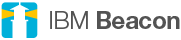
<style>
.page{position:relative;width:181px;height:40px;background:#ffffff}
.page>*{position:absolute;margin:0}
.t1{font:24px "HelvNeueBoldforIBM";color:#535353}
.t2{font:24px "HelvNeueLightforIBM";color:#535353}
</style>
<div class="page">
<p class="t1" style="left:50px;top:11px;width:130px;height:18px"><span class="t2">IBM </span>Beacon</p>
</div>
